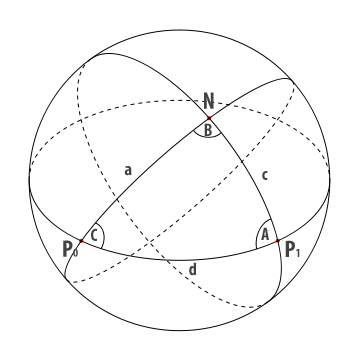
<style>
.page{position:relative;width:356px;height:358px;background:#ffffff}
.page>*{position:absolute;margin:0}
.t1{font:24px "MyriadPro-BoldCond";color:#424242}
.t2{font:18px "MyriadPro-BoldCond";color:#424242}
.t3{font:12px "MyriadPro-BoldCond";color:#424242}
</style>
<div class="page">
<p class="t1" style="left:204px;top:92px;width:10px;height:17px">N</p>
<p class="t2" style="left:204px;top:123px;width:8px;height:13px">B</p>
<p class="t2" style="left:124px;top:166px;width:8px;height:10px">a</p>
<p class="t2" style="left:262px;top:171px;width:6px;height:9px">c</p>
<p class="t2" style="left:91px;top:228px;width:7px;height:13px">C</p>
<p class="t2" style="left:261px;top:227px;width:8px;height:13px">A</p>
<p class="t1" style="left:63px;top:240px;width:15px;height:17px">P<span class="t3">0</span></p>
<p class="t1" style="left:285px;top:240px;width:15px;height:17px">P<span class="t3">1</span></p>
<p class="t2" style="left:189px;top:262px;width:7px;height:14px">d</p>
</div>
